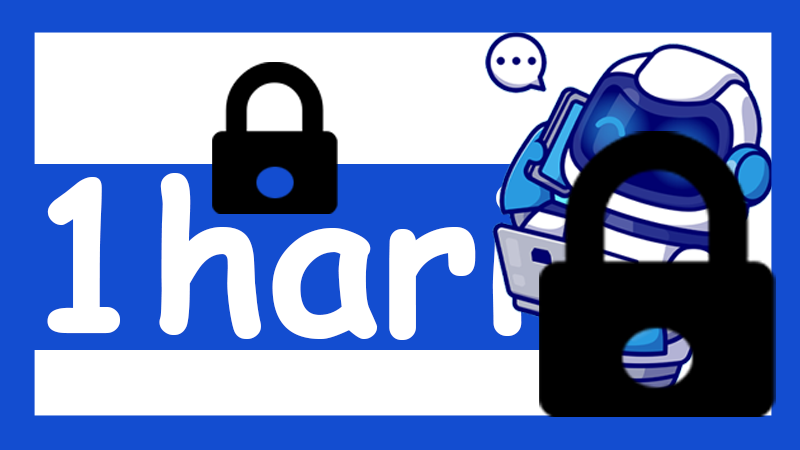
<style>
.page{position:relative;width:800px;height:450px;background:#134dd0}
.page>*{position:absolute;margin:0}
.t1{font:204.8px "ComicSansMS-Bold";color:#ffffff}
</style>
<div class="page">
<p class="t1" style="left:47px;top:173px;width:481px;height:167px">1hari</p>
</div>
